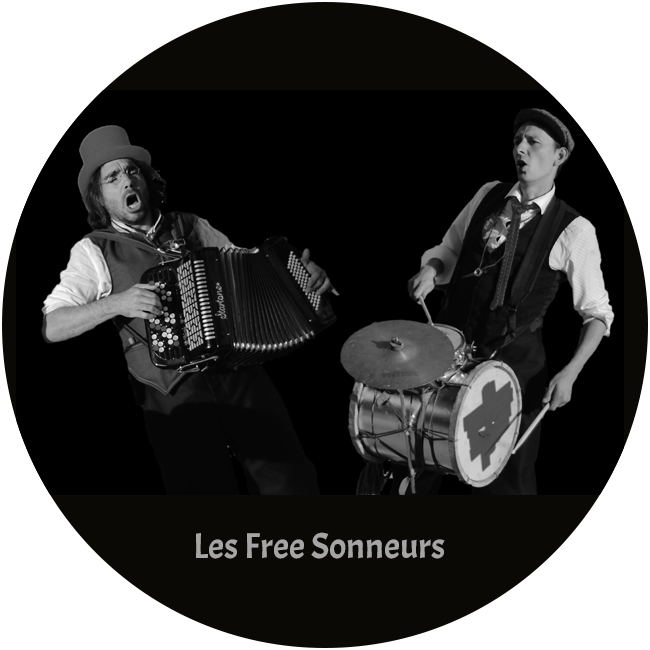
<style>
.page{position:relative;width:650px;height:650px;background:#000000}
.page>*{position:absolute;margin:0}
.t1{font:36px "Acme-Regular";color:#a5a5a5}
</style>
<div class="page">
<p class="t1" style="left:196px;top:532px;width:249px;height:27px">Les Free Sonneurs</p>
</div>
